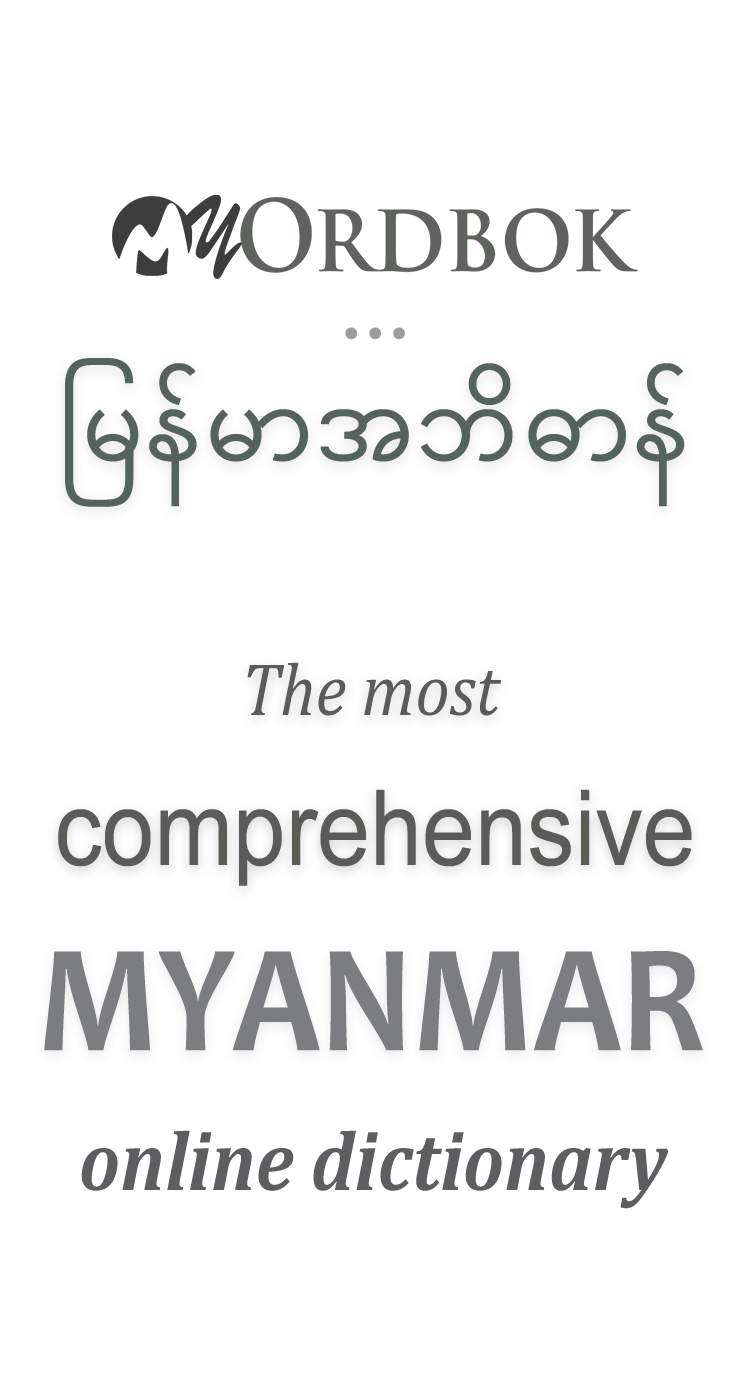
<style>
.page{position:relative;width:750px;height:1400px;background:#ffffff}
.page>*{position:absolute;margin:0}
.t1{font:98px "MyanmarText";color:#9b9c9c;font-weight:bold}
.t2{font:98px "MyanmarText";color:#55635e;font-weight:bold}
.t3{font:75px "Cambria-Italic";color:#595c57;scale:0.9 1}
.t4{font:105px "ArialMT";color:#595c57;scale:0.9 1}
.t5{font:155px "Candara-Bold";color:#7b7d81;text-transform:uppercase;scale:0.9 1}
.t6{font:85px "Cambria-BoldItalic";color:#5d5e60;scale:0.9 1}
</style>
<div class="page">
<p class="t1" style="left:345px;top:327px;width:60px;height:13px">...</p>
<p class="t2" style="left:65px;top:358px;width:620px;height:149px">ြမန်မာအဘိဓာန်</p>
<p class="t3" style="left:247px;top:662px;width:255px;height:54px">The most</p>
<p class="t4" style="left:58px;top:789px;width:634px;height:97px">comprehensive</p>
<p class="t5" style="left:44px;top:951px;width:659px;height:100px">Myanmar</p>
<p class="t6" style="left:81px;top:1130px;width:588px;height:79px">online dictionary</p>
</div>
